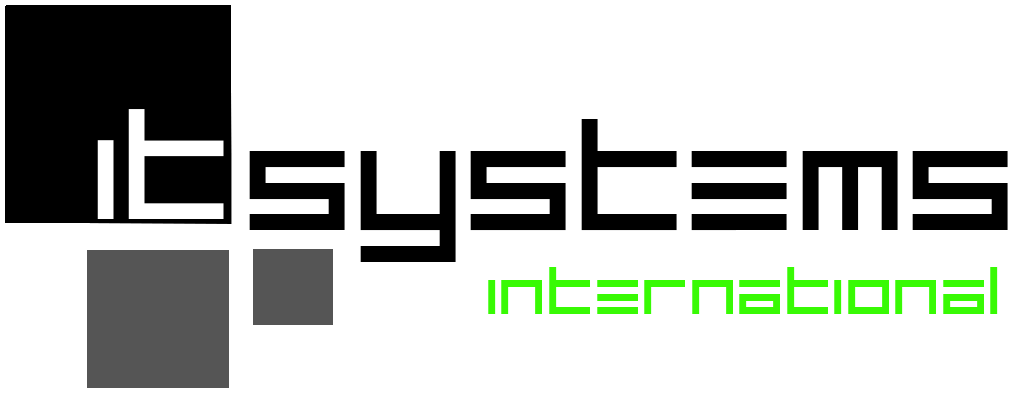
<style>
.page{position:relative;width:1014px;height:408px;background:#ffffff}
.page>*{position:absolute;margin:0}
.t1{font:133.3px "UnsteadyOversteer-Regular";color:#000000}
.t2{font:57.3px "UnsteadyOversteer-Regular";color:#38fa04}
</style>
<div class="page">
<p class="t1" style="left:89px;top:93px;width:143px;height:158px">it</p>
<p class="t1" style="left:249px;top:119px;width:759px;height:143px">SYSTEMS</p>
<p class="t2" style="left:488px;top:267px;width:510px;height:47px">INTERNATIONAL</p>
</div>
